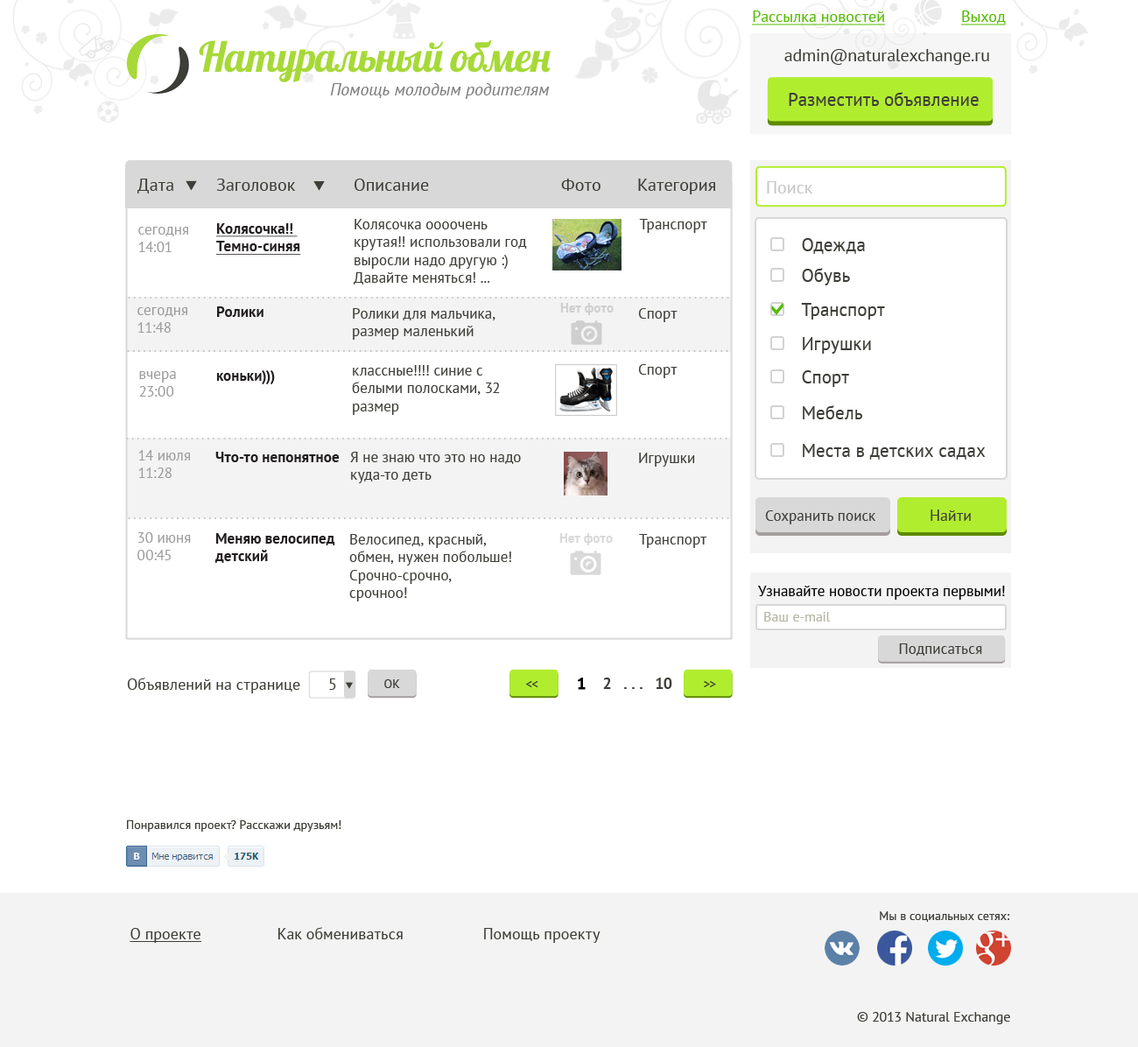
<style>
.page{position:relative;width:1138px;height:1047px;background:#ffffff}
.page>*{position:absolute;margin:0}
.t1{font:15.8px "PTSans-Regular";color:#53ba00;text-decoration:underline}
.t2{font:41.5px "Lobster";letter-spacing:-0.08em;color:#a6d937}
.t3{font:17.5px "PTSans-Regular";color:#3e3e38}
.t4{font:17.5px "PTSans-Italic";color:#7f7f7f}
.t5{font:18.4px "PTSans-Regular";color:#3e3e38}
.t6{font:17.5px "PTSans-Regular";color:#c7c6c6}
.t7{font:14.9px "PTSans-Regular";color:#3e3e38}
.t8{font:14.9px "PTSans-Regular";color:#9c9c9c}
.t9{font:14.9px "PTSans-Bold";color:#221e1f;text-decoration:underline}
.t10{font:12.3px "PTSans-Regular";letter-spacing:0.22em;color:#c4c4c4}
.t11{font:14.9px "PTSans-Bold";color:#221e1f}
.t12{font:15.8px "PTSans-Regular";color:#3e3e38}
.t13{font:14.9px "PTSans-Regular";color:#000000}
.t14{font:14px "PTSans-Regular";color:#b6b6a3}
.t15{font:15.8px "PTSans-Regular";color:#3d3d36}
.t16{font:15.8px "PTSans-Bold";color:#3e3e38}
.t17{font:15.8px "PTSans-Bold";color:#000000;font-weight:bold}
.t18{font:12.4px "PTSans-Regular";color:#3e3e38}
.t19{font:13.1px "PTSans-Regular";color:#3e3e38}
.t20{font:12.3px "PTSans-Regular";color:#3e3e38}
.t21{font:15.8px "PTSans-Regular";color:#3e3e38;text-decoration:underline}
.t22{font:14px "PTSans-Regular";color:#3e3e38}
</style>
<div class="page">
<p class="t1" style="left:752px;top:11px;width:134px;height:14px">Рассылка новостей</p>
<p class="t1" style="left:962px;top:11px;width:44px;height:14px">Выход</p>
<p class="t2" style="left:199px;top:40px;width:352px;height:42px">Натуральный  обмен</p>
<p class="t3" style="left:785px;top:49px;width:205px;height:16px">admin@naturalexchange.ru</p>
<p class="t4" style="left:330px;top:83px;width:220px;height:16px">Помощь молодым родителям</p>
<p class="t5" style="left:789px;top:92px;width:190px;height:14px">Разместить объявление</p>
<p class="t3" style="left:137px;top:179px;width:36px;height:15px">Дата</p>
<p class="t3" style="left:216px;top:179px;width:80px;height:12px">Заголовок</p>
<p class="t3" style="left:355px;top:179px;width:74px;height:12px">Описание</p>
<p class="t3" style="left:561px;top:179px;width:40px;height:12px">Фото</p>
<p class="t3" style="left:638px;top:179px;width:77px;height:15px">Категория</p>
<p class="t6" style="left:767px;top:181px;width:47px;height:13px">Поиск</p>
<p class="t7" style="left:354px;top:219px;width:173px;height:66px">Колясочка оооочень крутая!! использовали год выросли надо другую :) Давайте меняться! ...</p>
<p class="t7" style="left:639px;top:219px;width:69px;height:14px">Транспорт</p>
<p class="t8" style="left:138px;top:227px;width:50px;height:25px">сегодня<br>14:01</p>
<p class="t9" style="left:216px;top:223px;width:85px;height:32px">Колясочка!! <br>Темно-синяя</p>
<p class="t5" style="left:802px;top:238px;width:63px;height:16px">Одежда</p>
<p class="t5" style="left:802px;top:268px;width:48px;height:17px">Обувь</p>
<p class="t10" style="left:128px;top:297px;width:601px;height:2px">................................................................................................................</p>
<p class="t5" style="left:801px;top:303px;width:84px;height:17px">Транспорт</p>
<p class="t8" style="left:137px;top:307px;width:50px;height:26px">сегодня 11:48</p>
<p class="t11" style="left:217px;top:307px;width:47px;height:10px">Ролики</p>
<p class="t7" style="left:353px;top:308px;width:143px;height:32px">Ролики для мальчика, размер маленький</p>
<p class="t7" style="left:638px;top:308px;width:40px;height:14px">Спорт</p>
<p class="t5" style="left:803px;top:337px;width:68px;height:17px">Игрушки</p>
<p class="t10" style="left:127px;top:350px;width:602px;height:2px">................................................................................................................</p>
<p class="t7" style="left:352px;top:365px;width:148px;height:50px">классные!!!! синие с белыми полосками, 32 размер</p>
<p class="t7" style="left:638px;top:364px;width:40px;height:14px">Спорт</p>
<p class="t8" style="left:139px;top:371px;width:37px;height:26px">вчера 23:00</p>
<p class="t11" style="left:217px;top:370px;width:58px;height:14px">коньки)))</p>
<p class="t5" style="left:802px;top:370px;width:47px;height:17px">Спорт</p>
<p class="t5" style="left:803px;top:405px;width:60px;height:14px">Мебель</p>
<p class="t10" style="left:126px;top:438px;width:602px;height:2px">................................................................................................................</p>
<p class="t5" style="left:803px;top:444px;width:183px;height:16px">Места в детских садах</p>
<p class="t8" style="left:138px;top:450px;width:52px;height:28px">14 июля 11:28</p>
<p class="t11" style="left:215px;top:452px;width:125px;height:10px">Что-то непонятное</p>
<p class="t7" style="left:350px;top:452px;width:171px;height:31px">Я не знаю что это но надо куда-то деть</p>
<p class="t7" style="left:639px;top:453px;width:56px;height:14px">Игрушки</p>
<p class="t12" style="left:931px;top:510px;width:40px;height:11px">Найти</p>
<p class="t10" style="left:128px;top:518px;width:601px;height:1px">................................................................................................................</p>
<p class="t7" style="left:765px;top:511px;width:111px;height:14px">Сохранить поиск</p>
<p class="t8" style="left:137px;top:532px;width:54px;height:28px">30 июня 00:45</p>
<p class="t11" style="left:215px;top:533px;width:120px;height:30px">Меняю велосипед детский</p>
<p class="t7" style="left:349px;top:534px;width:162px;height:68px">Велосипед, красный, обмен, нужен побольше!<br>Срочно-срочно,<br>срочноо!</p>
<p class="t7" style="left:639px;top:534px;width:69px;height:14px">Транспорт</p>
<p class="t13" style="left:758px;top:586px;width:247px;height:14px">Узнавайте новости проекта первыми!</p>
<p class="t14" style="left:765px;top:612px;width:66px;height:10px">Ваш e-mail</p>
<p class="t7" style="left:899px;top:644px;width:84px;height:12px">Подписаться</p>
<p class="t15" style="left:127px;top:678px;width:173px;height:16px">Объявлений на странице</p>
<p class="t16" style="left:578px;top:678px;width:95px;height:12px"><span class="t17">1 </span>   2   . . .   10</p>
<p class="t12" style="left:329px;top:679px;width:7px;height:11px">5</p>
<p class="t18" style="left:384px;top:680px;width:16px;height:8px">ОК</p>
<p class="t19" style="left:526px;top:681px;width:13px;height:6px">&lt;&lt;</p>
<p class="t19" style="left:704px;top:681px;width:12px;height:6px;rotate:180deg">&lt;&lt;</p>
<p class="t20" style="left:127px;top:821px;width:215px;height:11px">Понравился проект? Расскажи друзьям!</p>
<p class="t20" style="left:880px;top:912px;width:130px;height:10px">Мы в социальных сетях:</p>
<p class="t12" style="left:130px;top:927px;width:471px;height:16px"><span class="t21">О проекте</span>       Как обмениваться            Помощь  проекту</p>
<p class="t22" style="left:857px;top:1012px;width:154px;height:13px">© 2013 Natural Exchange</p>
</div>
